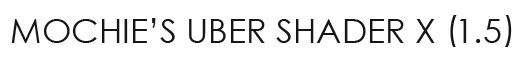
<style>
.page{position:relative;width:512px;height:64px;background:#ffffff}
.page>*{position:absolute;margin:0}
.t1{font:34px "CenturyGothic";color:#161616}
</style>
<div class="page">
<p class="t1" style="left:11px;top:18px;width:490px;height:25px">MOCHIE’S UBER SHADER X  1.5</p>
</div>
